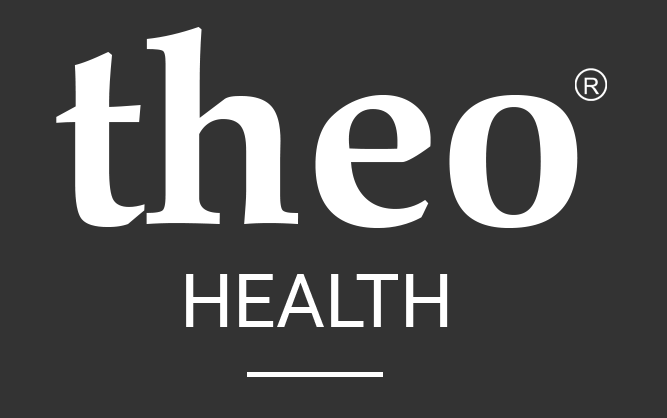
<style>
.page{position:relative;width:667px;height:418px;background:#333333}
.page>*{position:absolute;margin:0}
.t1{font:270.8px "ZapfCalligraphic801BT-Bold";color:#ffffff}
.t2{font:75px "Roboto-Regular";color:#ffffff}
</style>
<div class="page">
<p class="t1" style="left:56px;top:27px;width:522px;height:201px">theo</p>
<p class="t2" style="left:186px;top:274px;width:262px;height:53px">HEALTH</p>
</div>
